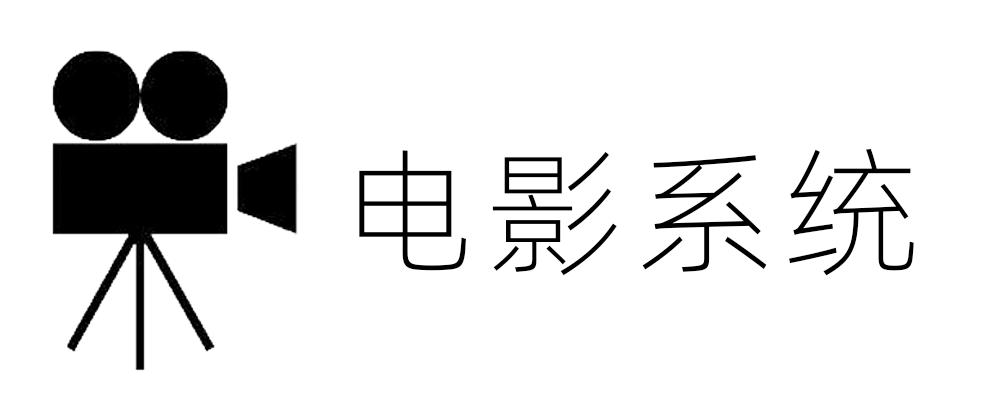
<style>
.page{position:relative;width:1000px;height:400px;background:#ffffff}
.page>*{position:absolute;margin:0}
.t1{font:140px "AlibabaPuHuiTiL";letter-spacing:0.08em;color:#000000}
</style>
<div class="page">
<p class="t1" style="left:359px;top:149px;width:555px;height:127px">电影系统</p>
</div>
